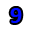
<style>
.page{position:relative;width:32px;height:32px;background:#ffffff}
.page>*{position:absolute;margin:0}
.t1{font:24px "Calibri-Bold";color:#000cff}
</style>
<div class="page">
<p class="t1" style="left:10px;top:8px;width:12px;height:15px">9</p>
</div>
